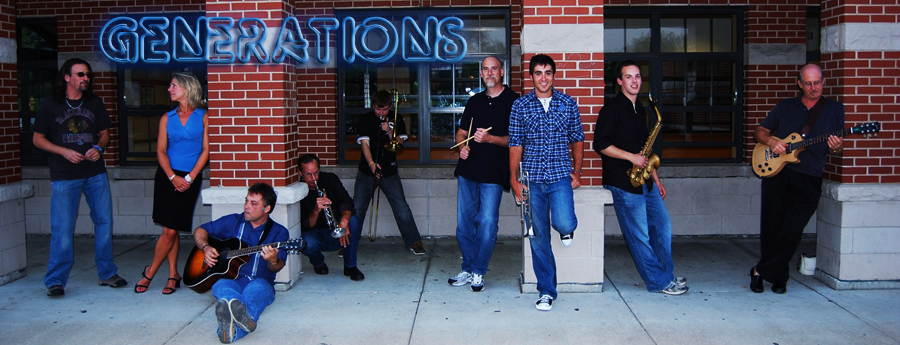
<style>
.page{position:relative;width:900px;height:345px}
.page>*{position:absolute;margin:0}
.t1{font:66.7px "NeonLights-";letter-spacing:-0.075em}
</style>
<div class="page">
<p class="t1" style="left:98px;top:16px;width:369px;height:48px">Generations</p>
</div>
